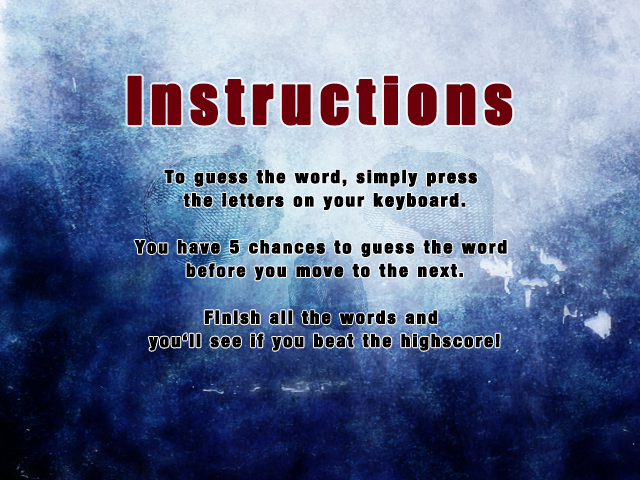
<style>
.page{position:relative;width:640px;height:480px}
.page>*{position:absolute;margin:0}
.t1{font:60px "Impact";letter-spacing:0.1em;color:#6c000a;font-weight:bold}
.t2{font:18px "Harvest";letter-spacing:0.1em;color:#000000;font-weight:bold}
</style>
<div class="page">
<p class="t1" style="left:127px;top:75px;width:386px;height:51px">Instructions</p>
<p class="t2" style="left:134px;top:169px;width:373px;height:182px;text-align:center">To guess the word, simply press <br>the letters on your keyboard.<br><br>You have 5 chances to guess the word <br>before you move to the next.<br><br>Finish all the words and <br>you‘ll see if you beat the highscore!</p>
</div>
